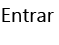
<style>
.page{position:relative;width:59px;height:45px;background:#ffffff}
.page>*{position:absolute;margin:0}
.t1{font:20.3px "MicrosoftNewTaiLue";color:#000000}
</style>
<div class="page">
<p class="t1" style="left:2px;top:8px;width:52px;height:14px">Entrar</p>
</div>
